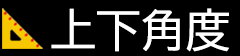
<style>
.page{position:relative;width:240px;height:56px;background:#000000}
.page>*{position:absolute;margin:0}
.t1{font:44.8px "BIZ-UDPGothic";color:#ffffff}
</style>
<div class="page">
<p class="t1" style="left:51px;top:8px;width:178px;height:44px">上下角度</p>
</div>
